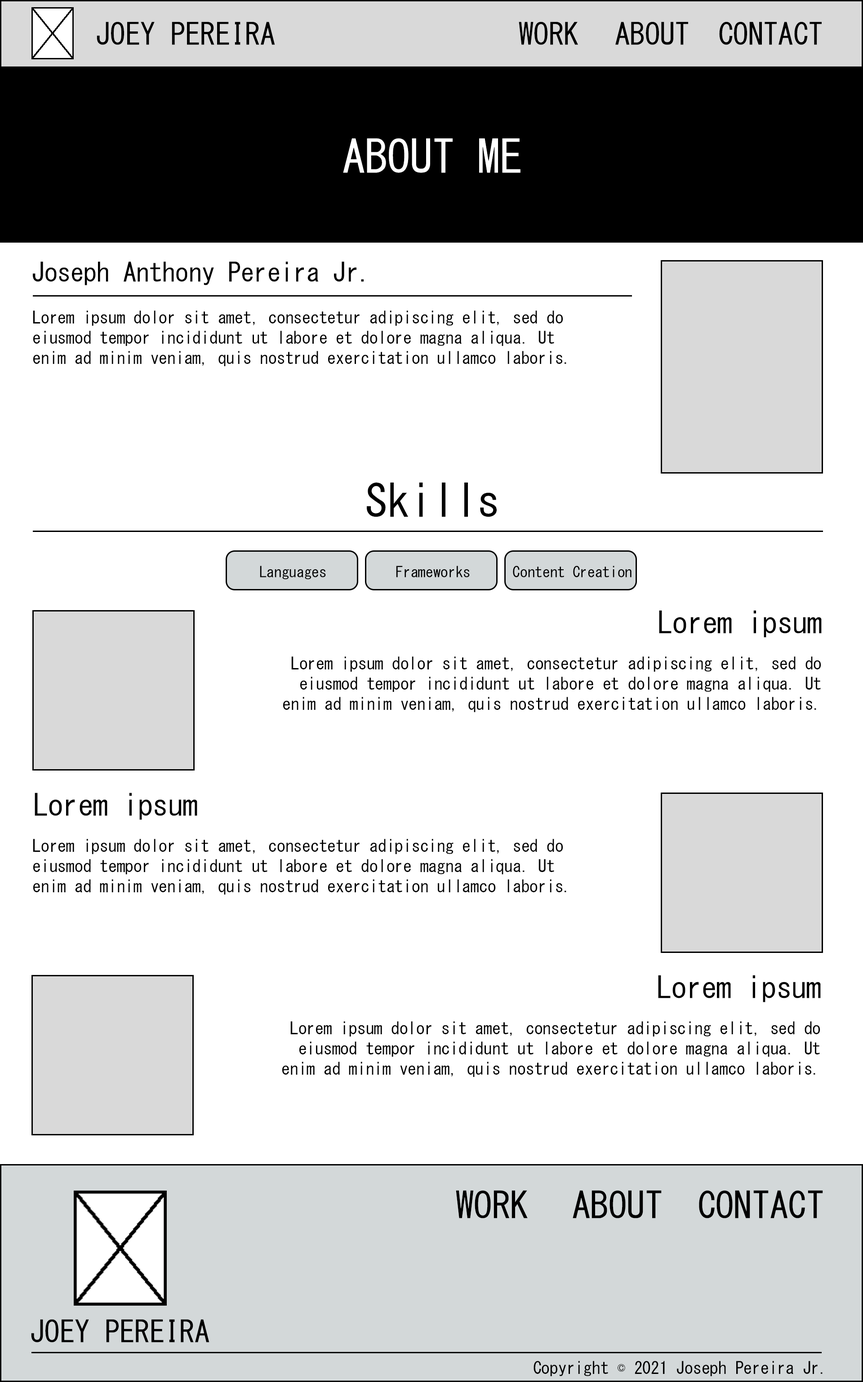
<style>
.page{position:relative;width:863px;height:1382px;background:#ffffff}
.page>*{position:absolute;margin:0}
.t1{font:30px "MS-Gothic";color:#000000}
.t2{font:44.9px "MS-Gothic";color:#ffffff}
.t3{font:26.2px "MS-Gothic";color:#000000}
.t4{font:16.9px "MS-Gothic";color:#000000}
.t5{font:44.9px "MS-Gothic";color:#000000}
.t6{font:15px "MS-Gothic";color:#000000}
.t7{font:36.3px "MS-Gothic";color:#000000}
</style>
<div class="page">
<p class="t1" style="left:97px;top:22px;width:178px;height:23px">JOEY PEREIRA</p>
<p class="t1" style="left:519px;top:22px;width:59px;height:23px">WORK</p>
<p class="t1" style="left:615px;top:22px;width:73px;height:23px">ABOUT</p>
<p class="t1" style="left:719px;top:22px;width:102px;height:23px">CONTACT</p>
<p class="t2" style="left:343px;top:138px;width:177px;height:35px">ABOUT ME</p>
<p class="t3" style="left:33px;top:262px;width:331px;height:23px">Joseph Anthony Pereira Jr.</p>
<p class="t4" style="left:33px;top:310px;width:533px;height:56px">Lorem ipsum dolor sit amet, consectetur adipiscing elit, sed do<br>eiusmod tempor incididunt ut labore et dolore magna aliqua. Ut <br>enim ad minim veniam, quis nostrud exercitation ullamco laboris.</p>
<p class="t5" style="left:367px;top:483px;width:130px;height:34px">Skills</p>
<p class="t6" style="left:260px;top:566px;width:66px;height:14px">Languages</p>
<p class="t6" style="left:396px;top:566px;width:74px;height:11px">Frameworks</p>
<p class="t6" style="left:513px;top:566px;width:118px;height:11px">Content Creation</p>
<p class="t1" style="left:659px;top:610px;width:162px;height:28px">Lorem ipsum</p>
<p class="t4" style="left:283px;top:656px;width:538px;height:56px;text-align:right">Lorem ipsum dolor sit amet, consectetur adipiscing elit, sed do<br>eiusmod tempor incididunt ut labore et dolore magna aliqua. Ut<br>enim ad minim veniam, quis nostrud exercitation ullamco laboris.</p>
<p class="t1" style="left:35px;top:793px;width:162px;height:27px">Lorem ipsum</p>
<p class="t4" style="left:33px;top:839px;width:533px;height:56px">Lorem ipsum dolor sit amet, consectetur adipiscing elit, sed do<br>eiusmod tempor incididunt ut labore et dolore magna aliqua. Ut<br>enim ad minim veniam, quis nostrud exercitation ullamco laboris.</p>
<p class="t1" style="left:658px;top:975px;width:162px;height:27px">Lorem ipsum</p>
<p class="t4" style="left:282px;top:1021px;width:538px;height:56px;text-align:right">Lorem ipsum dolor sit amet, consectetur adipiscing elit, sed do<br>eiusmod tempor incididunt ut labore et dolore magna aliqua. Ut<br>enim ad minim veniam, quis nostrud exercitation ullamco laboris.</p>
<p class="t7" style="left:456px;top:1190px;width:72px;height:29px">WORK</p>
<p class="t7" style="left:572px;top:1190px;width:89px;height:29px">ABOUT</p>
<p class="t7" style="left:699px;top:1190px;width:124px;height:29px">CONTACT</p>
<p class="t1" style="left:31px;top:1319px;width:178px;height:24px">JOEY PEREIRA</p>
<p class="t4" style="left:533px;top:1361px;width:289px;height:15px">Copyright © 2021 Joseph Pereira Jr.</p>
</div>
